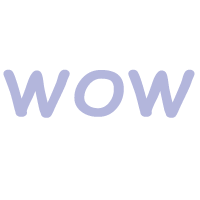
<style>
.page{position:relative;width:200px;height:200px;background:#ffffff}
.page>*{position:absolute;margin:0}
.t1{font:60px "ComicSansMS-Bold";color:#b3b6dc;font-weight:bold;scale:1.1 1}
</style>
<div class="page">
<p class="t1" style="left:3px;top:69px;width:192px;height:49px">WOW</p>
</div>
